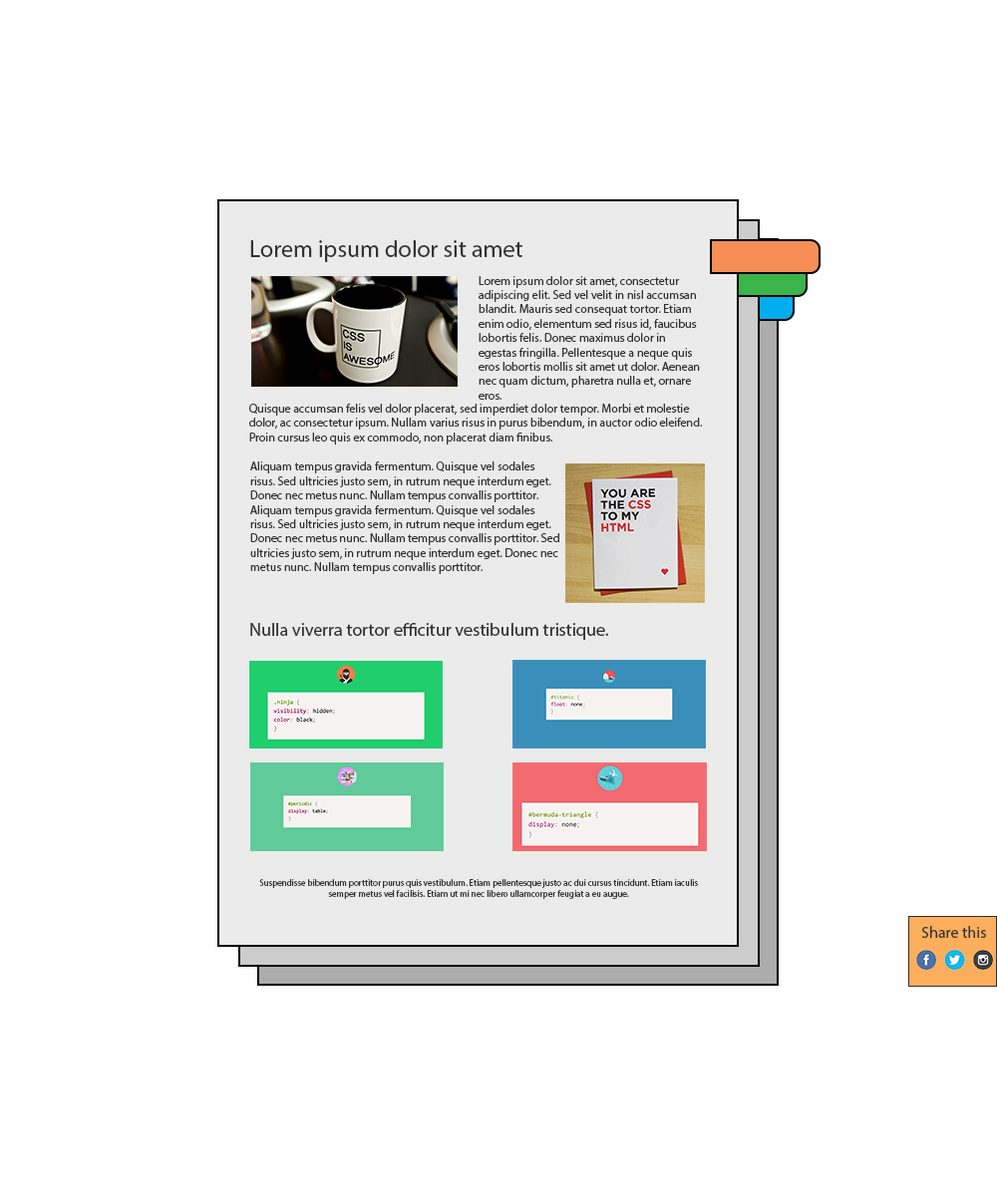
<style>
.page{position:relative;width:997px;height:1196px;background:#ffffff}
.page>*{position:absolute;margin:0}
.t1{font:23.9px "MyriadPro-Regular";color:#333333}
.t2{font:12px "MyriadPro-Regular";color:#333333}
.t3{font:17.9px "MyriadPro-Regular";color:#333333}
.t4{font:9px "MyriadPro-Regular";color:#333333}
.t5{font:15.9px "MyriadPro-Regular";color:#333333}
</style>
<div class="page">
<p class="t1" style="left:250px;top:240px;width:272px;height:22px">Lorem ipsum dolor sit amet</p>
<p class="t2" style="left:478px;top:276px;width:222px;height:124px">Lorem ipsum dolor sit amet, consectetur adipiscing elit. Sed vel velit in nisl accumsan blandit. Mauris sed consequat tortor. Etiam enim odio, elementum sed risus id, faucibus lobortis felis. Donec maximus dolor in egestas fringilla. Pellentesque a neque quis eros lobortis mollis sit amet ut dolor. Aenean nec quam dictum, pharetra nulla et, ornare eros.</p>
<p class="t2" style="left:249px;top:404px;width:453px;height:41px">Quisque accumsan felis vel dolor placerat, sed imperdiet dolor tempor. Morbi et molestie dolor, ac consectetur ipsum. Nullam varius risus in purus bibendum, in auctor odio eleifend. Proin cursus leo quis ex commodo, non placerat diam finibus.</p>
<p class="t2" style="left:250px;top:462px;width:309px;height:112px">Aliquam tempus gravida fermentum. Quisque vel sodales risus. Sed ultricies justo sem, in rutrum neque interdum eget. Donec nec metus nunc. Nullam tempus convallis porttitor. Aliquam tempus gravida fermentum. Quisque vel sodales risus. Sed ultricies justo sem, in rutrum neque interdum eget. Donec nec metus nunc. Nullam tempus convallis porttitor. Sed ultricies justo sem, in rutrum neque interdum eget. Donec nec metus nunc. Nullam tempus convallis porttitor.</p>
<p class="t3" style="left:250px;top:623px;width:358px;height:17px">Nulla viverra tortor efficitur vestibulum tristique.</p>
<p class="t4" style="left:259px;top:879px;width:439px;height:20px;text-align:center">Suspendisse bibendum porttitor purus quis vestibulum. Etiam pellentesque justo ac dui cursus tincidunt. Etiam iaculis semper metus vel facilisis. Etiam ut mi nec libero ullamcorper feugiat a eu augue.</p>
<p class="t5" style="left:921px;top:926px;width:65px;height:12px">Share this</p>
</div>
